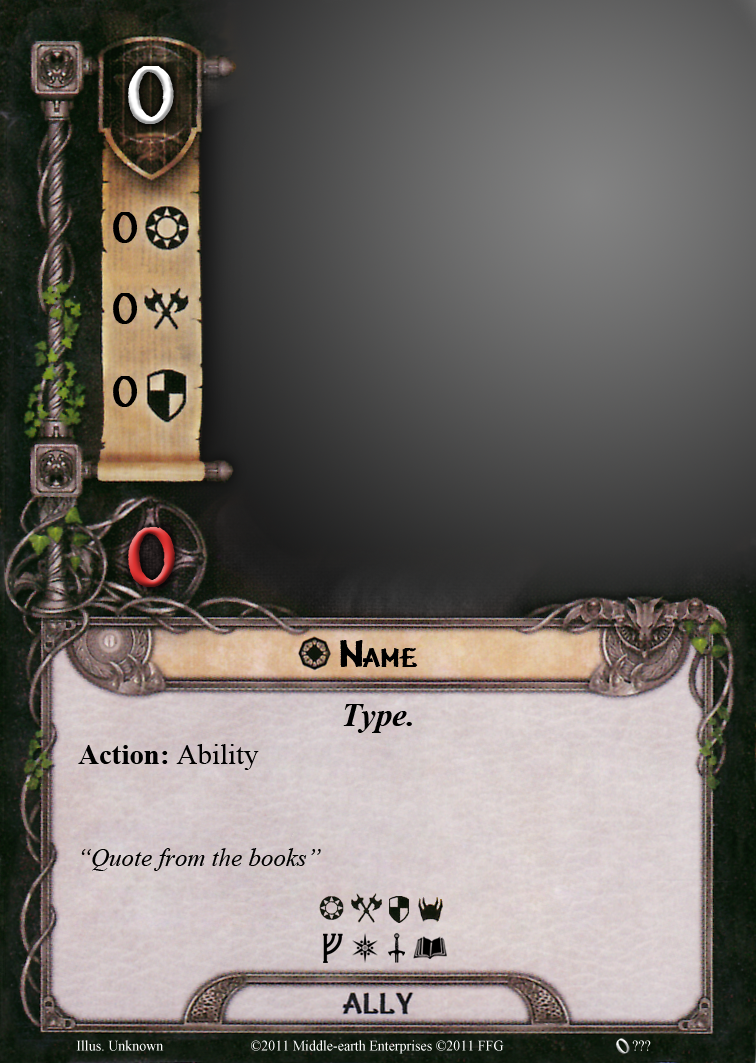
<style>
.page{position:relative;width:756px;height:1063px}
.page>*{position:absolute;margin:0}
.t1{font:79.2px "Vafthrudnir";font-variant:small-caps}
.t2{font:41.7px "Vafthrudnir";color:#000000;font-variant:small-caps}
.t3{font:81.2px "Vafthrudnir";font-variant:small-caps}
.t4{font:37.5px "Vafthrudnir";letter-spacing:-0.002em;color:#000000;font-variant:small-caps}
.t5{font:33.3px "TimesNewRomanPS-BoldItalicMT";color:#000000}
.t6{font:29.2px "TimesNewRomanPS-BoldMT";color:#000000}
.t7{font:29.2px "TimesNewRomanPSMT";color:#000000}
.t8{font:25px "TimesNewRomanPS-ItalicMT";color:#000000}
.t9{font:14.6px "TimesNewRomanPSMT";color:#ffffff;scale:0.96 1}
</style>
<div class="page">
<p class="t1" style="left:128px;top:66px;width:46px;height:58px">0</p>
<p class="t2" style="left:113px;top:212px;width:25px;height:31px">0</p>
<p class="t2" style="left:113px;top:293px;width:25px;height:31px">0</p>
<p class="t2" style="left:113px;top:376px;width:25px;height:31px">0</p>
<p class="t3" style="left:128px;top:527px;width:47px;height:60px">0</p>
<p class="t4" style="left:340px;top:640px;width:78px;height:27px">Name</p>
<p class="t5" style="left:343px;top:704px;width:69px;height:29px">Type.</p>
<p class="t6" style="left:78px;top:744px;width:181px;height:26px">Action: <span class="t7">Ability</span></p>
<p class="t8" style="left:81px;top:848px;width:240px;height:23px">“Quote from the books”</p>
<p class="t9" style="left:76px;top:1040px;width:88px;height:11px">Illus. Unknown</p>
<p class="t9" style="left:251px;top:1040px;width:253px;height:14px">©2011 Middle-earth Enterprises ©2011 FFG</p>
<p class="t9" style="left:632px;top:1040px;width:19px;height:11px">???</p>
</div>
